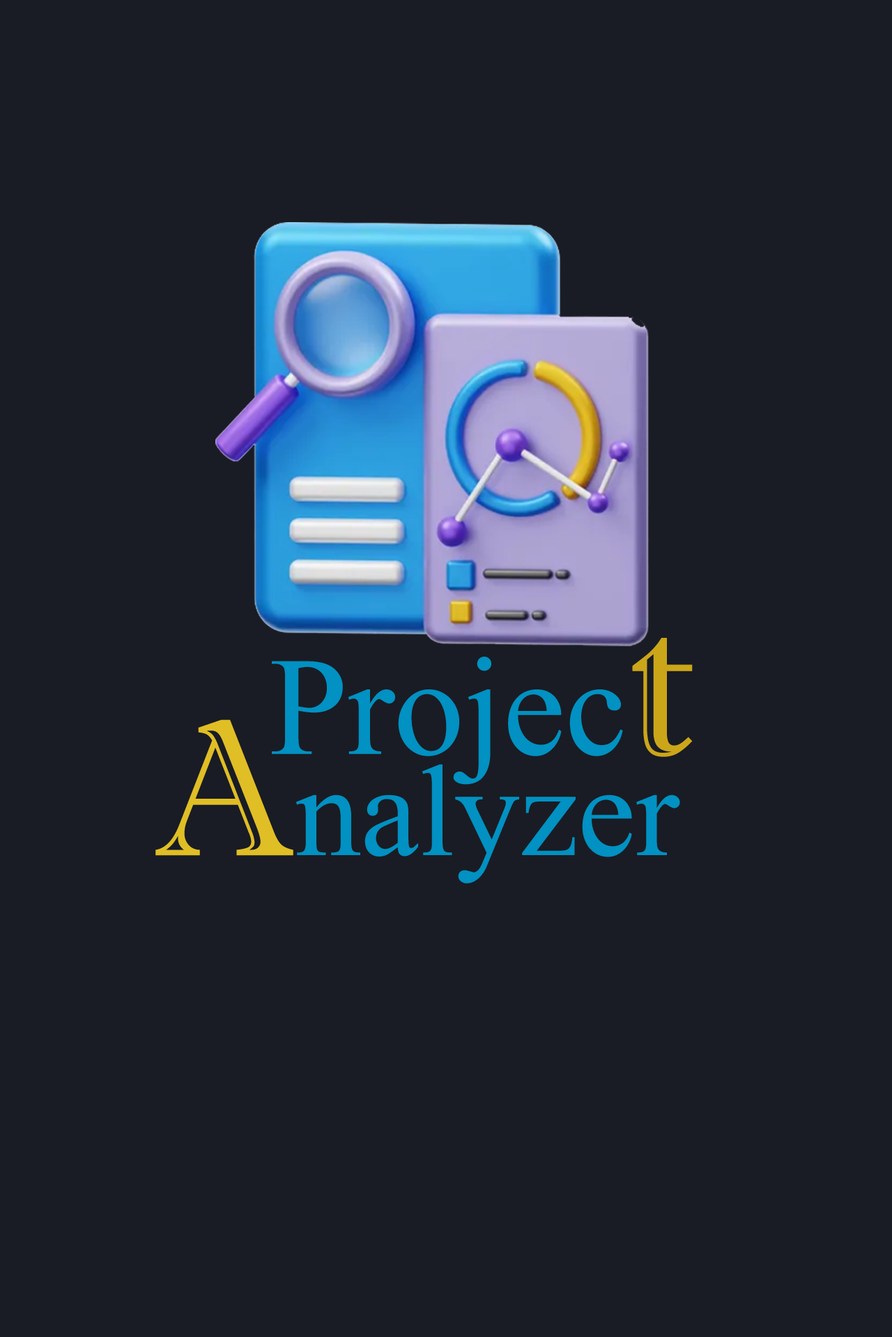
<style>
.page{position:relative;width:892px;height:1337px;background:#191c24}
.page>*{position:absolute;margin:0}
.t1{font:209px "Microsoft-Himalaya";color:#0191c2}
.t2{font:209px "ImprintMT-Shadow";color:#cca619}
.t3{font:194.5px "Microsoft-Himalaya";color:#0191c2}
.t4{font:194.5px "ImprintMT-Shadow";color:#e0be25}
</style>
<div class="page">
<p class="t1" style="left:272px;top:638px;width:420px;height:147px">Projec<span class="t2">t</span></p>
<p class="t3" style="left:155px;top:720px;width:525px;height:164px"><span class="t4">A</span>nalyzer</p>
</div>
